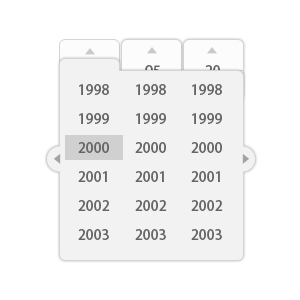
<style>
.page{position:relative;width:300px;height:300px;background:#ffffff}
.page>*{position:absolute;margin:0}
.t1{font:14px "AdobeHeitiStd-Regular"}
.t2{font:14px "AdobeHeitiStd-Regular";color:#666666}
</style>
<div class="page">
<p class="t1" style="left:145px;top:65px;width:15px;height:11px">05</p>
<p class="t1" style="left:205px;top:65px;width:15px;height:11px">20</p>
<p class="t2" style="left:79px;top:84px;width:30px;height:11px">1998</p>
<p class="t2" style="left:136px;top:84px;width:30px;height:11px">1998</p>
<p class="t2" style="left:192px;top:84px;width:30px;height:11px">1998</p>
<p class="t2" style="left:79px;top:113px;width:30px;height:11px">1999</p>
<p class="t2" style="left:136px;top:113px;width:30px;height:11px">1999</p>
<p class="t2" style="left:192px;top:113px;width:30px;height:11px">1999</p>
<p class="t2" style="left:78px;top:142px;width:31px;height:11px">2000</p>
<p class="t2" style="left:135px;top:142px;width:31px;height:11px">2000</p>
<p class="t2" style="left:191px;top:142px;width:31px;height:11px">2000</p>
<p class="t2" style="left:78px;top:171px;width:29px;height:11px">2001</p>
<p class="t2" style="left:135px;top:171px;width:29px;height:11px">2001</p>
<p class="t2" style="left:191px;top:171px;width:29px;height:11px">2001</p>
<p class="t2" style="left:78px;top:200px;width:32px;height:11px">2002</p>
<p class="t2" style="left:135px;top:200px;width:32px;height:11px">2002</p>
<p class="t2" style="left:191px;top:200px;width:32px;height:11px">2002</p>
<p class="t2" style="left:78px;top:229px;width:31px;height:11px">2003</p>
<p class="t2" style="left:135px;top:229px;width:31px;height:11px">2003</p>
<p class="t2" style="left:191px;top:229px;width:31px;height:11px">2003</p>
</div>
